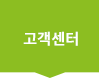
<style>
.page{position:relative;width:99px;height:78px;background:#8cbe21}
.page>*{position:absolute;margin:0}
.t1{font:15.4px "NotoSansCJKkr-Bold";color:#ffffff}
</style>
<div class="page">
<p class="t1" style="left:23px;top:31px;width:55px;height:15px">고객센터</p>
</div>
